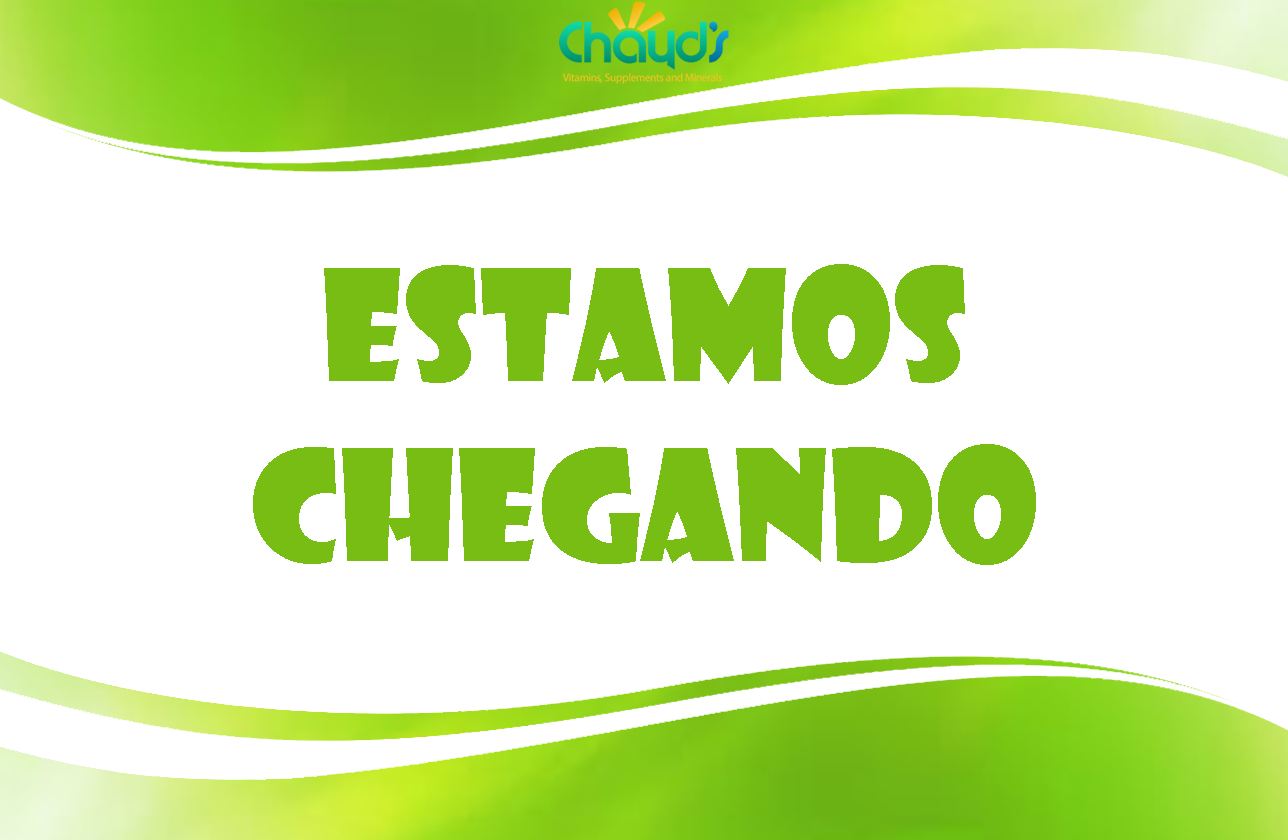
<style>
.page{position:relative;width:1288px;height:840px;background:#ffffff}
.page>*{position:absolute;margin:0}
.t1{font:150px "ShowcardGothic-Reg";color:#78bd14}
</style>
<div class="page">
<p class="t1" style="left:253px;top:264px;width:783px;height:301px;text-align:center">ESTAMOS<br>CHEGANDO</p>
</div>
